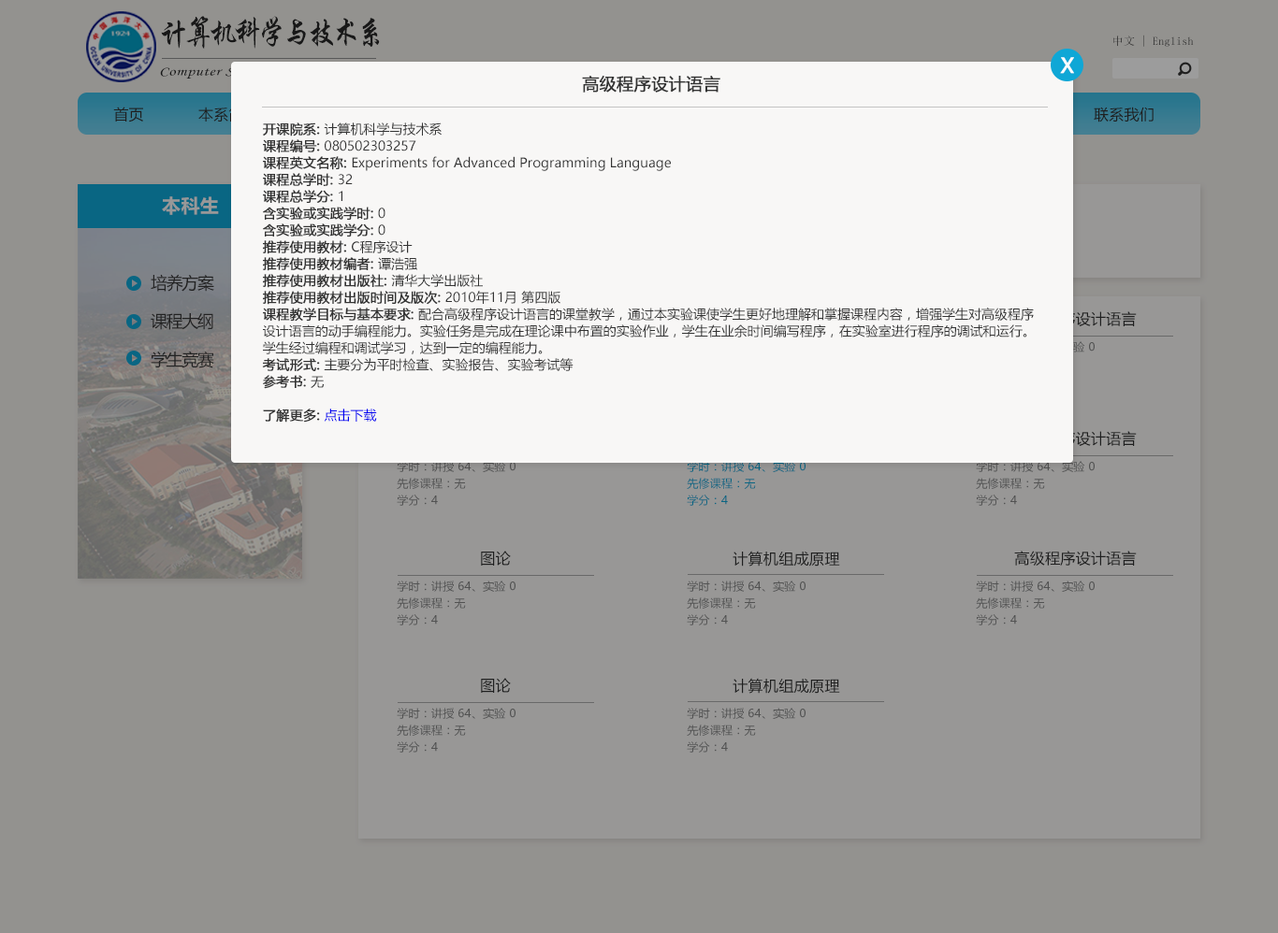
<style>
.page{position:relative;width:1278px;height:933px;background:#93928f}
.page>*{position:absolute;margin:0}
.t1{font:32.6px "STXingkai";letter-spacing:-0.14em;color:#272727;scale:0.88 1}
.t2{font:11.2px "SimSun";letter-spacing:0.02em}
.t3{font:20.6px "MicrosoftYaHei";color:#ffffff;font-weight:bold}
.t4{font:16.8px "MicrosoftYaHei";color:#333333;font-weight:bold}
.t5{font:15px "MicrosoftYaHei";letter-spacing:0.02em;color:#333333}
.t6{font:13.1px/16.8px "MicrosoftYaHei";color:#333333}
.t7{font:13.1px/16.8px "MicrosoftYaHei";color:#333333;font-weight:bold}
.t8{font:13.1px/16.8px "MicrosoftYaHei";color:#0000f0}
.t9{font:18.7px "MicrosoftYaHei-Bold";letter-spacing:0.02em;color:#989898}
.t10{font:16.8px "MicrosoftYaHei";letter-spacing:-0.076em;color:#383838}
.t11{font:11.2px/16.8px "MicrosoftYaHei";letter-spacing:0.02em;color:#515151}
.t12{font:11.2px/16.8px "MicrosoftYaHei";letter-spacing:0.02em;color:#096582}
.t13{font:11.2px/16.8px "MicrosoftYaHei";letter-spacing:0.02em;color:#525252}
</style>
<div class="page">
<p class="t1" style="left:161px;top:16px;width:219px;height:33px">计算机科学与技术系</p>
<p class="t2" style="left:1113px;top:35px;width:80px;height:12px">中文 | English</p>
<p class="t3" style="left:1060px;top:57px;width:14px;height:17px">X</p>
<p class="t4" style="left:582px;top:76px;width:138px;height:17px">高级程序设计语言</p>
<p class="t5" style="left:113px;top:107px;width:30px;height:16px">首页</p>
<p class="t5" style="left:1093px;top:107px;width:60px;height:16px">联系我们</p>
<p class="t6" style="left:262px;top:123px;width:771px;height:300px"><span class="t7">开课院系: </span>计算机科学与技术系<br><span class="t7">课程编号: </span>080502303257<br><span class="t7">课程英文名称: </span>Experiments for Advanced Programming Language<br><span class="t7">课程总学时: </span>32<br><span class="t7">课程总学分: </span>1<br><span class="t7">含实验或实践学时: </span>0<br><span class="t7">含实验或实践学分: </span>0<br><span class="t7">推荐使用教材: </span>C程序设计<br><span class="t7">推荐使用教材编者: </span>谭浩强<br><span class="t7">推荐使用教材出版社: </span>清华大学出版社<br><span class="t7">推荐使用教材出版时间及版次: </span>2010年11月 第四版<br><span class="t7">课程教学目标与基本要求: </span>配合高级程序设计语言的课堂教学，通过本实验课使学生更好地理解和掌握课程内容，增强学生对高级程序设计语言的动手编程能力。实验任务是完成在理论课中布置的实验作业，学生在业余时间编写程序，在实验室进行程序的调试和运行。学生经过编程和调试学习，达到一定的编程能力。<br><span class="t7">考试形式: </span>主要分为平时检查、实验报告、实验考试等<br><span class="t7">参考书: </span>无<br><br><span class="t7">了解更多: </span><span class="t8">点击下载</span></p>
<p class="t9" style="left:162px;top:196px;width:57px;height:19px">本科生</p>
<p class="t10" style="left:151px;top:274px;width:63px;height:18px">培养方案</p>
<p class="t10" style="left:151px;top:313px;width:62px;height:17px">课程大纲</p>
<p class="t10" style="left:151px;top:351px;width:63px;height:17px">学生竞赛</p>
<p class="t11" style="left:397px;top:461px;width:118px;height:45px">学时：讲授 64、实验 0<br>先修课程：无<br>学分：4</p>
<p class="t12" style="left:686px;top:461px;width:119px;height:45px">学时：讲授 64、实验 0<br>先修课程：无<br>学分：4</p>
<p class="t13" style="left:975px;top:461px;width:119px;height:45px">学时：讲授 64、实验 0<br>先修课程：无<br>学分：4</p>
<p class="t5" style="left:481px;top:551px;width:30px;height:15px">图论</p>
<p class="t5" style="left:732px;top:551px;width:108px;height:16px">计算机组成原理</p>
<p class="t5" style="left:1014px;top:551px;width:122px;height:15px">高级程序设计语言</p>
<p class="t13" style="left:397px;top:581px;width:118px;height:45px">学时：讲授 64、实验 0<br>先修课程：无<br>学分：4</p>
<p class="t13" style="left:686px;top:581px;width:119px;height:45px">学时：讲授 64、实验 0<br>先修课程：无<br>学分：4</p>
<p class="t13" style="left:975px;top:581px;width:119px;height:45px">学时：讲授 64、实验 0<br>先修课程：无<br>学分：4</p>
<p class="t5" style="left:481px;top:678px;width:30px;height:15px">图论</p>
<p class="t5" style="left:732px;top:678px;width:108px;height:16px">计算机组成原理</p>
<p class="t13" style="left:397px;top:708px;width:118px;height:45px">学时：讲授 64、实验 0<br>先修课程：无<br>学分：4</p>
<p class="t13" style="left:686px;top:708px;width:119px;height:45px">学时：讲授 64、实验 0<br>先修课程：无<br>学分：4</p>
</div>
